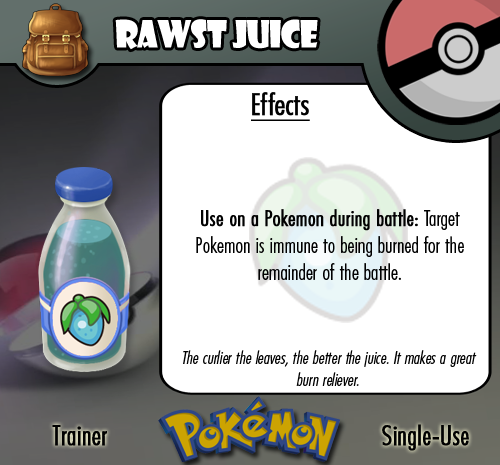
<style>
.page{position:relative;width:500px;height:465px;background:#ffffff}
.page>*{position:absolute;margin:0}
.t1{font:36.7px "ShowcardGothic-Reg";letter-spacing:-0.025em;color:#ffffff;scale:0.91 1}
.t2{font:22.2px "FuturaCondensedBQ-Light";color:#010101}
.t3{font:27.8px "FuturaCondensedBQ-Light";color:#010101;font-weight:bold}
.t4{font:30.6px "FuturaCondensedBQ-Light";color:#010101;font-weight:bold;text-decoration:underline}
.t5{font:22.2px "FuturaCondensedBQ-Light";color:#010101;font-weight:bold}
.t6{font:18.1px "FuturaCondensedBQ-Light";color:#010101;font-style:italic}
</style>
<div class="page">
<p class="t1" style="left:115px;top:19px;width:203px;height:31px">Rawst Juice</p>
<p class="t2" style="left:196px;top:92px;width:268px;height:188px"><span class="t3">  </span><span class="t4">Effects<br><br><br><br><br><br></span><span class="t5">Use on a Pokemon during battle:</span> Target Pokemon is immune to being burned for the remainder of the battle.</p>
<p class="t6" style="left:183px;top:350px;width:294px;height:36px;text-align:center">The curlier the leaves, the better the juice. It makes a great burn reliever.</p>
<p class="t3" style="left:52px;top:425px;width:55px;height:21px">Trainer</p>
<p class="t3" style="left:382px;top:424px;width:87px;height:27px">Single-Use</p>
</div>
